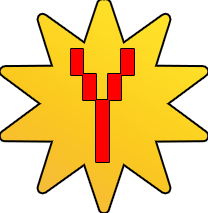
<style>
.page{position:relative;width:208px;height:213px;background:#ffffff}
.page>*{position:absolute;margin:0}
.t1{font:150px "PixelMplus12-Regular";color:#ff0000}
</style>
<div class="page">
<p class="t1" style="left:71px;top:49px;width:63px;height:113px">Y</p>
</div>
